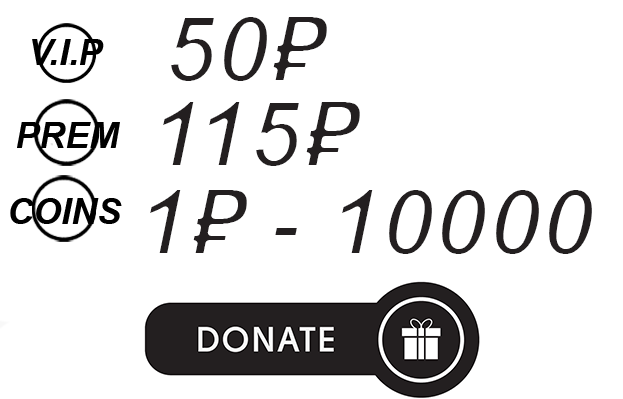
<style>
.page{position:relative;width:623px;height:399px;background:#ffffff}
.page>*{position:absolute;margin:0}
.t1{font:96px "Arial-BoldItalicMT"}
.t2{font:35.8px "Arial-BoldItalicMT";color:#000000}
</style>
<div class="page">
<p class="t1" style="left:168px;top:14px;width:162px;height:70px">50₽</p>
<p class="t2" style="left:32px;top:39px;width:72px;height:26px">V.I.P</p>
<p class="t1" style="left:159px;top:99px;width:204px;height:70px">115₽</p>
<p class="t2" style="left:17px;top:122px;width:103px;height:26px">PREM</p>
<p class="t2" style="left:10px;top:198px;width:112px;height:26px">COINS</p>
<p class="t1" style="left:146px;top:187px;width:449px;height:70px">1₽ - 10000</p>
</div>
